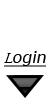
<style>
.page{position:relative;width:50px;height:100px;background:#ffffff}
.page>*{position:absolute;margin:0}
.t1{font:15.9px "Verdana";color:#000000;font-style:italic;text-decoration:underline}
.t2{font:15.9px "BRAZIL-Normal";color:#000000;font-style:italic;text-decoration:underline}
</style>
<div class="page">
<p class="t1" style="left:4px;top:51px;width:42px;height:16px"><span class="t2">L</span>ogin</p>
</div>
